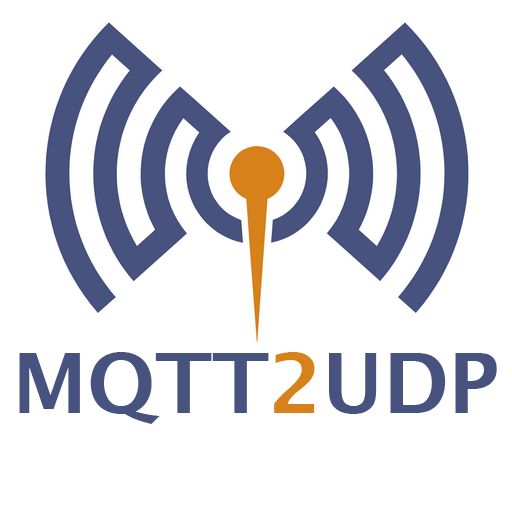
<style>
.page{position:relative;width:512px;height:512px;background:#ffffff}
.page>*{position:absolute;margin:0}
.t1{font:82.6px "LucidaSans-Demi";color:#47527e}
.t2{font:82.6px "LucidaSans-Demi";color:#d7811b}
</style>
<div class="page">
<p class="t1" style="left:19px;top:352px;width:478px;height:72px">MQTT<span class="t2">2</span>UDP</p>
</div>
